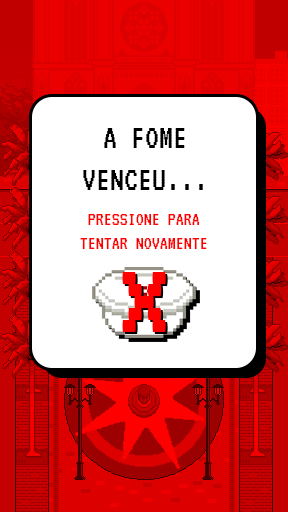
<style>
.page{position:relative;width:288px;height:512px;background:#ffffff}
.page>*{position:absolute;margin:0}
.t1{font:35px "VT323-Regular";color:#000000}
.t2{font:20px "VT323-Regular";color:#ff0000}
.t3{font:150px "VT323-Regular";color:#ff0000}
</style>
<div class="page">
<p class="t1" style="left:83px;top:128px;width:120px;height:62px;text-align:center">A FOME<br>VENCEU...</p>
<p class="t2" style="left:80px;top:214px;width:127px;height:35px;text-align:center">PRESSIONE PARA<br>TENTAR NOVAMENTE</p>
<p class="t3" style="left:122px;top:272px;width:44px;height:60px">x</p>
</div>
